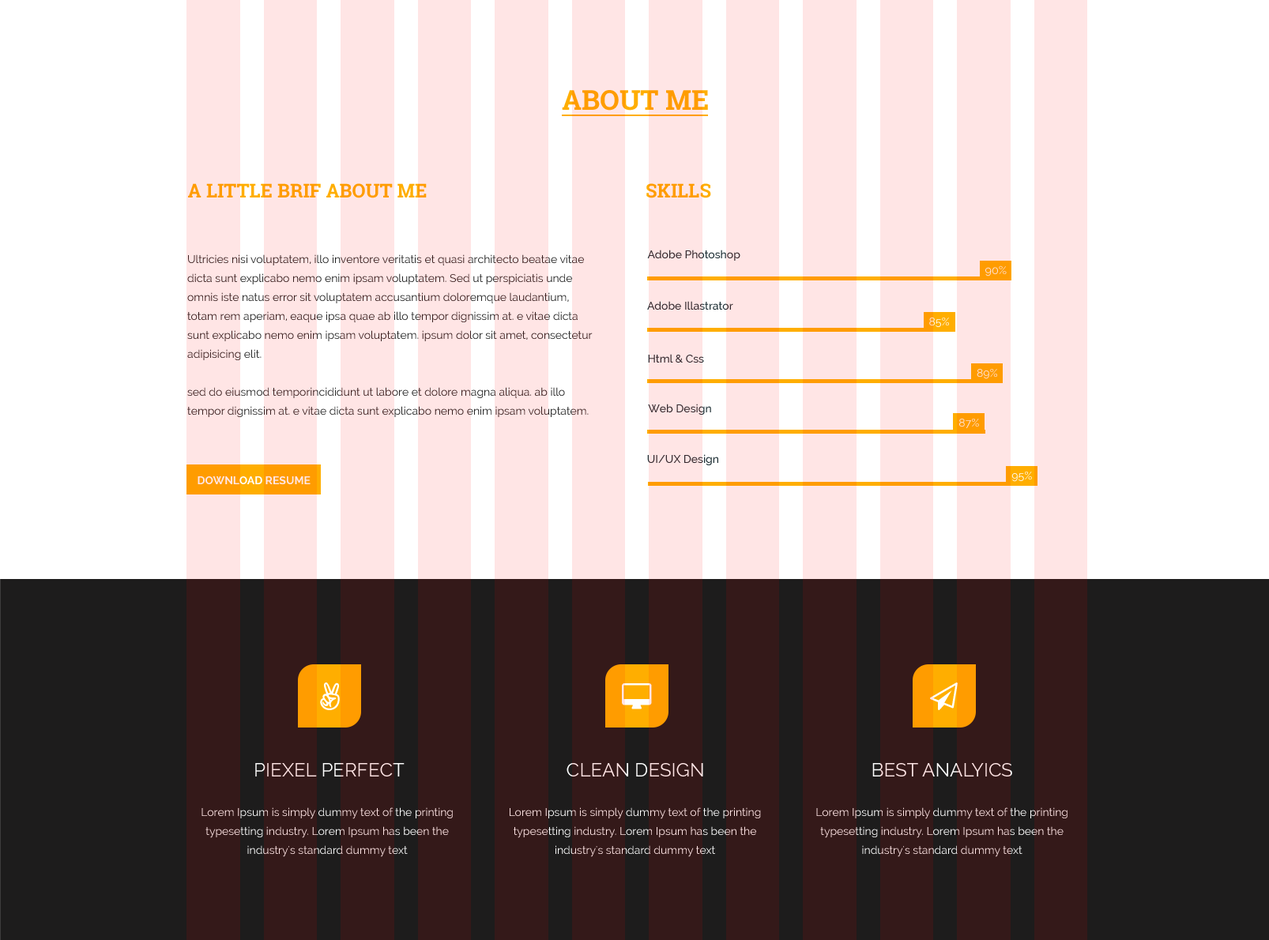
<style>
.page{position:relative;width:1269px;height:940px;background:#ffffff}
.page>*{position:absolute;margin:0}
.t1{font:27.6px "RobotoSlab-Bold";color:#ffae00;text-transform:uppercase}
.t2{font:19px "RobotoSlab-Bold";color:#ffae00;text-transform:uppercase}
.t3{font:11.1px/19px "Raleway";color:#232323}
.t4{font:11.1px "Raleway-Medium";color:#1c2d33}
.t5{font:11.4px "Raleway";color:#ffe5e5;text-transform:uppercase}
.t6{font:11.1px "Raleway";color:#ffffff;text-transform:uppercase}
.t7{font:11.1px "Raleway";color:#ffe5e5;text-transform:uppercase}
.t8{font:11.1px "Raleway";text-transform:uppercase}
.t9{font:11.1px "Raleway-Bold";color:#ffe5e5;text-transform:uppercase}
.t10{font:19px "Raleway";color:#ffe5e5;text-transform:uppercase}
.t11{font:19px "Raleway";text-transform:uppercase}
.t12{font:11.1px/19px "Raleway"}
</style>
<div class="page">
<p class="t1" style="left:562px;top:90px;width:146px;height:21px">ABOUT Me</p>
<p class="t2" style="left:188px;top:183px;width:239px;height:15px">A little brif ABOUT Me</p>
<p class="t2" style="left:646px;top:183px;width:65px;height:15px">SKILLS</p>
<p class="t3" style="left:187px;top:254px;width:405px;height:163px">Ultricies nisi voluptatem, illo inventore veritatis et quasi architecto beatae vitae dicta sunt explicabo nemo enim ipsam voluptatem. Sed ut perspiciatis unde omnis iste natus error sit voluptatem accusantium doloremque laudantium, totam rem aperiam, eaque ipsa quae ab illo tempor dignissim at. e vitae dicta sunt explicabo nemo enim ipsam voluptatem. ipsum dolor sit amet, consectetur adipisicing elit.<br><br>sed do eiusmod temporincididunt ut labore et dolore magna aliqua. ab illo tempor dignissim at. e vitae dicta sunt explicabo nemo enim ipsam voluptatem.</p>
<p class="t4" style="left:647px;top:250px;width:93px;height:11px">Adobe Photoshop</p>
<p class="t5" style="left:985px;top:265px;width:21px;height:11px">90%</p>
<p class="t4" style="left:647px;top:301px;width:86px;height:9px">Adobe Illastrator</p>
<p class="t6" style="left:929px;top:318px;width:20px;height:9px">85%</p>
<p class="t4" style="left:648px;top:354px;width:56px;height:9px">Html &amp; Css</p>
<p class="t7" style="left:976px;top:369px;width:21px;height:10px">89%</p>
<p class="t4" style="left:648px;top:404px;width:63px;height:11px">Web Design</p>
<p class="t7" style="left:959px;top:419px;width:20px;height:9px">87%</p>
<p class="t4" style="left:647px;top:454px;width:71px;height:11px">UI/UX Design</p>
<p class="t8" style="left:1011px;top:472px;width:21px;height:10px">95%</p>
<p class="t9" style="left:197px;top:476px;width:113px;height:9px">Download Resume</p>
<p class="t10" style="left:255px;top:763px;width:149px;height:13px">PIEXEL Perfect</p>
<p class="t10" style="left:566px;top:763px;width:137px;height:13px">CLEAN DESIGN</p>
<p class="t11" style="left:872px;top:763px;width:140px;height:13px">BEST ANALYICs</p>
<p class="t12" style="left:201px;top:807px;width:252px;height:50px;text-align:center">Lorem Ipsum is simply dummy text of the printing typesetting industry. Lorem Ipsum has been the industry's standard dummy text</p>
<p class="t12" style="left:509px;top:807px;width:252px;height:50px;text-align:center">Lorem Ipsum is simply dummy text of the printing typesetting industry. Lorem Ipsum has been the industry's standard dummy text</p>
<p class="t12" style="left:816px;top:807px;width:251px;height:50px;text-align:center">Lorem Ipsum is simply dummy text of the printing typesetting industry. Lorem Ipsum has been the industry's standard dummy text</p>
</div>
